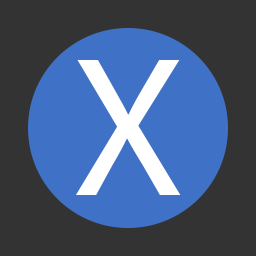
<style>
.page{position:relative;width:256px;height:256px;background:#333333}
.page>*{position:absolute;margin:0}
.t1{font:200px "MyriadPro-Regular";color:#ffffff}
</style>
<div class="page">
<p class="t1" style="left:76px;top:60px;width:105px;height:135px">X</p>
</div>
